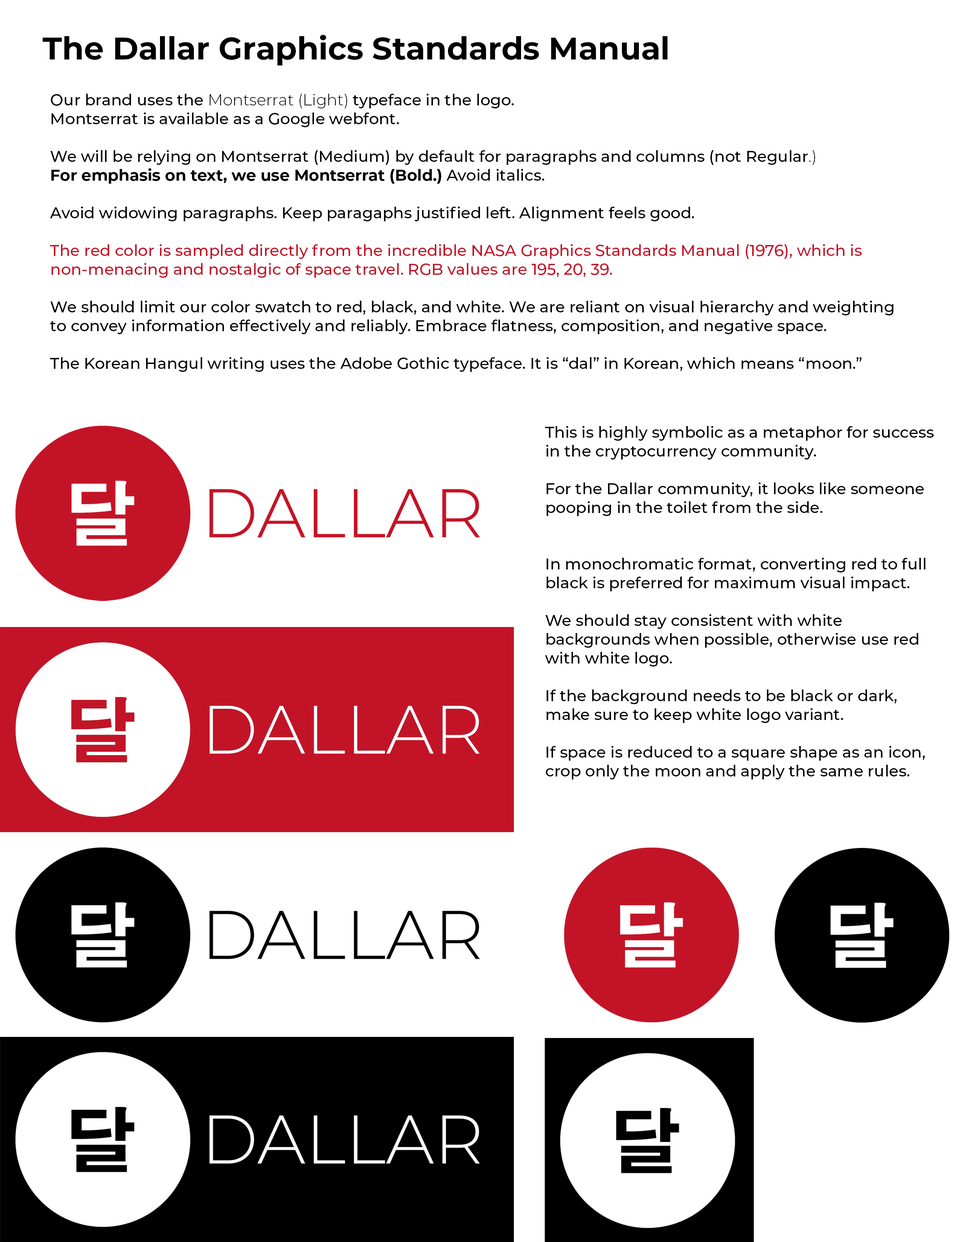
<style>
.page{position:relative;width:960px;height:1242px;background:#ffffff}
.page>*{position:absolute;margin:0}
.t1{font:31.4px "Montserrat-Bold";color:#000000}
.t2{font:15.7px "Montserrat-Medium";color:#000000}
.t3{font:15.7px "Montserrat-Light";color:#000000}
.t4{font:15.7px "Montserrat-Bold";color:#000000}
.t5{font:15.7px "Montserrat-Medium";color:#c31427}
</style>
<div class="page">
<p class="t1" style="left:43px;top:35px;width:624px;height:30px">The Dallar Graphics Standards Manual</p>
<p class="t2" style="left:50px;top:93px;width:843px;height:279px">Our brand uses the <span class="t3">Montserrat (Light) </span>typeface in the logo. <br>Montserrat is available as a Google webfont. <br><br>We will be relying on Montserrat (Medium) by default for paragraphs and columns (not Regular<span class="t3">.)<br></span><span class="t4">For emphasis on text, we use Montserrat (Bold.) </span>Avoid italics.<br><br>Avoid widowing paragraphs. Keep paragaphs justified left. Alignment feels good.<br><br><span class="t5">The red color is sampled directly from the incredible NASA Graphics Standards Manual (1976), which is <br>non-menacing and nostalgic of space travel. RGB values are 195, 20, 39.<br><br></span>We should limit our color swatch to red, black, and white. We are reliant on visual hierarchy and weighting<br>to convey information effectively and reliably. Embrace flatness, composition, and negative space.<br><br>The Korean Hangul writing uses the Adobe Gothic typeface. It is “dal” in Korean, which means “moon.”</p>
<p class="t2" style="left:545px;top:426px;width:389px;height:354px">This is highly symbolic as a metaphor for success<br>in the cryptocurrency community.<br><br>For the Dallar community, it looks like someone<br>pooping in the toilet from the side.<br><br><br>In monochromatic format, converting red to full<br>black is preferred for maximum visual impact.<br><br>We should stay consistent with white <br>backgrounds when possible, otherwise use red <br>with white logo. <br><br>If the background needs to be black or dark, <br>make sure to keep white logo variant.<br><br>If space is reduced to a square shape as an icon, <br>crop only the moon and apply the same rules.</p>
</div>
